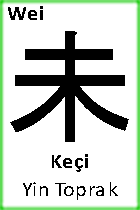
<style>
.page{position:relative;width:140px;height:210px;background:#ffffff}
.page>*{position:absolute;margin:0}
.t1{font:21.2px "Calibri-Bold";color:#000000}
.t2{font:127px "MS-Gothic";color:#000000}
.t3{font:21.2px "Calibri";color:#000000}
</style>
<div class="page">
<p class="t1" style="left:8px;top:6px;width:35px;height:14px">Wei</p>
<p class="t2" style="left:10px;top:31px;width:119px;height:111px">未</p>
<p class="t1" style="left:52px;top:154px;width:36px;height:18px">Keçi</p>
<p class="t3" style="left:23px;top:182px;width:95px;height:18px">Yin Toprak</p>
</div>
